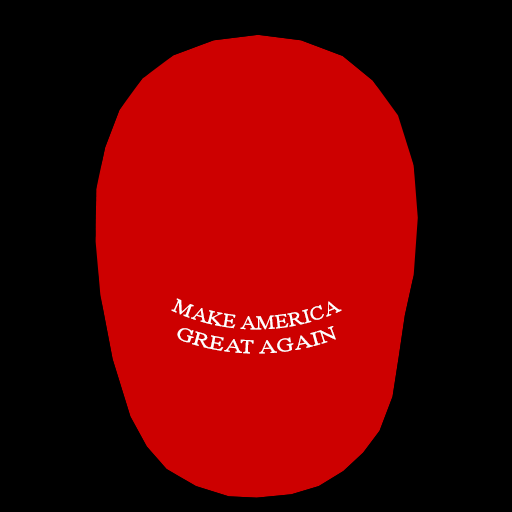
<style>
.page{position:relative;width:512px;height:512px;background:#000000}
.page>*{position:absolute;margin:0}
.t1{font:20.1px "TimesNewRomanPSMT";color:#ffffff}
</style>
<div class="page">
<p class="t1" style="left:171px;top:298px;width:171px;height:56px;text-align:center">MAKE AMERICA<br>GREAT AGAIN</p>
</div>
